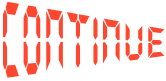
<style>
.page{position:relative;width:166px;height:81px;background:#ffffff}
.page>*{position:absolute;margin:0}
.t1{font:75px "QuartzMS";color:#ff462e;scale:0.48 1}
</style>
<div class="page">
<p class="t1" style="left:3px;top:1px;width:162px;height:77px">CONTINUE</p>
</div>
